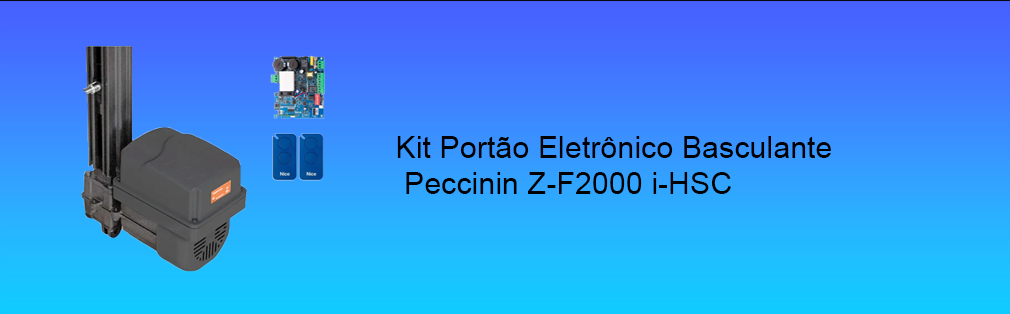
<style>
.page{position:relative;width:1010px;height:314px}
.page>*{position:absolute;margin:0}
.t1{font:30.5px "ArialMT";color:#000000}
</style>
<div class="page">
<p class="t1" style="left:397px;top:136px;width:434px;height:58px">Kit Portão Eletrônico Basculante<br> Peccinin Z-F2000 i-HSC</p>
</div>
